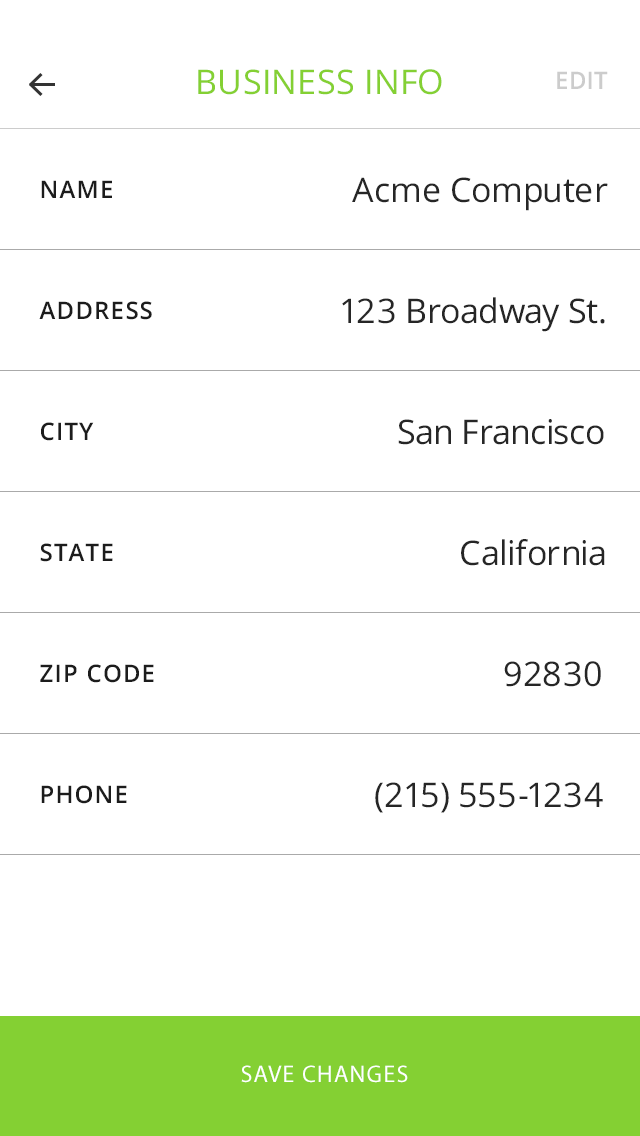
<style>
.page{position:relative;width:640px;height:1136px;background:#ffffff}
.page>*{position:absolute;margin:0}
.t1{font:34px "OpenSans";letter-spacing:0.01em;color:#84d033}
.t2{font:24px "OpenSans-Semibold";letter-spacing:0.01em;color:#cccccc}
.t3{font:24px "OpenSans-Semibold";letter-spacing:0.05em;color:#1c1c1c;text-transform:uppercase}
.t4{font:34px "OpenSans";color:#262626}
.t5{font:24px "MyriadPro-Regular";letter-spacing:0.05em;color:#ffffff;text-transform:uppercase}
</style>
<div class="page">
<p class="t1" style="left:198px;top:69px;width:244px;height:26px">BUSINESS INFO</p>
<p class="t2" style="left:557px;top:71px;width:51px;height:18px">EDIT</p>
<p class="t3" style="left:41px;top:180px;width:71px;height:18px">NAME</p>
<p class="t4" style="left:352px;top:177px;width:256px;height:34px">Acme Computer</p>
<p class="t3" style="left:39px;top:301px;width:113px;height:19px">ADDRESS</p>
<p class="t4" style="left:342px;top:297px;width:263px;height:35px">123 Broadway St.</p>
<p class="t3" style="left:41px;top:422px;width:53px;height:19px">CITY</p>
<p class="t4" style="left:398px;top:419px;width:206px;height:26px">San Francisco</p>
<p class="t3" style="left:40px;top:543px;width:73px;height:19px">STATE</p>
<p class="t4" style="left:461px;top:539px;width:144px;height:27px">California</p>
<p class="t3" style="left:40px;top:664px;width:114px;height:19px">ZIP CODE</p>
<p class="t4" style="left:504px;top:661px;width:97px;height:26px">92830</p>
<p class="t3" style="left:41px;top:785px;width:86px;height:19px">PHONE</p>
<p class="t4" style="left:375px;top:782px;width:228px;height:31px">(215) 555-1234</p>
<p class="t5" style="left:241px;top:1065px;width:167px;height:18px">SAVE CHANGES</p>
</div>
